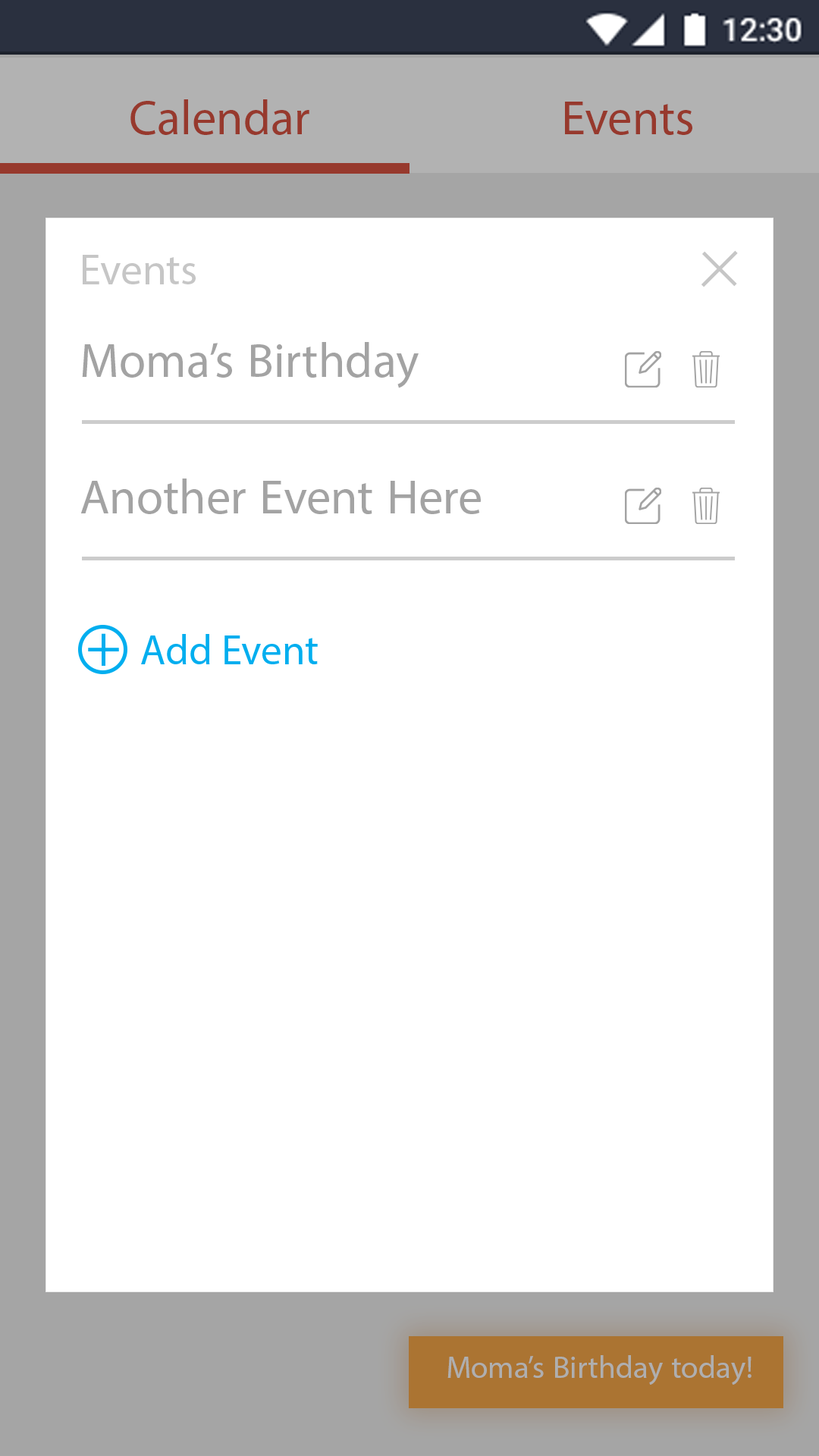
<style>
.page{position:relative;width:819px;height:1456px;background:#ffffff}
.page>*{position:absolute;margin:0}
.t1{font:68.2px "MyriadArabic-Regular";color:#97392d}
.t2{font:60.7px "MyriadArabic-Regular";color:#c6c6c6}
.t3{font:111.5px "BaskOldFace";color:#c6c6c6}
.t4{font:68.2px "MyriadArabic-Regular";color:#a3a3a3}
.t5{font:60px "MyriadPro-Regular";color:#00aeef}
.t6{font:41.7px "MyriadPro-Regular";color:#00aeef}
.t7{font:43.8px "MyriadArabic-Regular";color:#afafaf}
</style>
<div class="page">
<p class="t1" style="left:130px;top:99px;width:179px;height:36px">Calendar</p>
<p class="t1" style="left:565px;top:102px;width:127px;height:33px">Events</p>
<p class="t2" style="left:83px;top:255px;width:113px;height:29px">Events</p>
<p class="t3" style="left:701px;top:250px;width:37px;height:37px;rotate:-45deg">+</p>
<p class="t4" style="left:82px;top:342px;width:337px;height:46px">Moma’s Birthday</p>
<p class="t4" style="left:80px;top:479px;width:401px;height:35px">Another Event Here</p>
<p class="t5" style="left:88px;top:633px;width:31px;height:33px">+</p>
<p class="t6" style="left:141px;top:634px;width:177px;height:30px">Add Event</p>
<p class="t7" style="left:447px;top:1355px;width:304px;height:30px">Moma’s Birthday today!</p>
</div>
